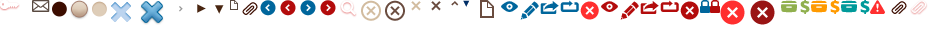
<style>
.page{position:relative;width:940px;height:32px;background:#ffffff}
.page>*{position:absolute;margin:0}
.t1{font:20px "WebSymbolsLiga-Regular";color:#594a42}
.t2{font:12px "OpenSans";color:#979797;text-decoration:underline}
.t3{font:12px "WebSymbolsLiga-Regular";color:#979797}
.t4{font:12px "OpenSans";color:#979797}
.t5{font:18px "OpenSans-Extrabold";color:#492611}
.t6{font:14px "WebSymbolsLiga-Regular";color:#3d0d00}
.t7{font:14px "WebSymbolsLiga-Regular";color:#492611}
.t8{font:24px "WebSymbolsLiga-Regular";color:#fb3333}
</style>
<div class="page">
<p class="t1" style="left:32px;top:0px;width:18px;height:12px">8</p>
<p class="t2" style="left:179px;top:6px;width:4px;height:6px">Главная <span class="t3">× </span><span class="t4">F,A,Q,</span></p>
<p class="t5" style="left:197px;top:4px;width:9px;height:9px">Как создать документ? <span class="t6">]</span></p>
<p class="t5" style="left:215px;top:5px;width:9px;height:9px">Как сохранить документ в образцы? <span class="t7">[</span></p>
<p class="t8" style="left:720px;top:0px;width:25px;height:25px">Í</p>
</div>
